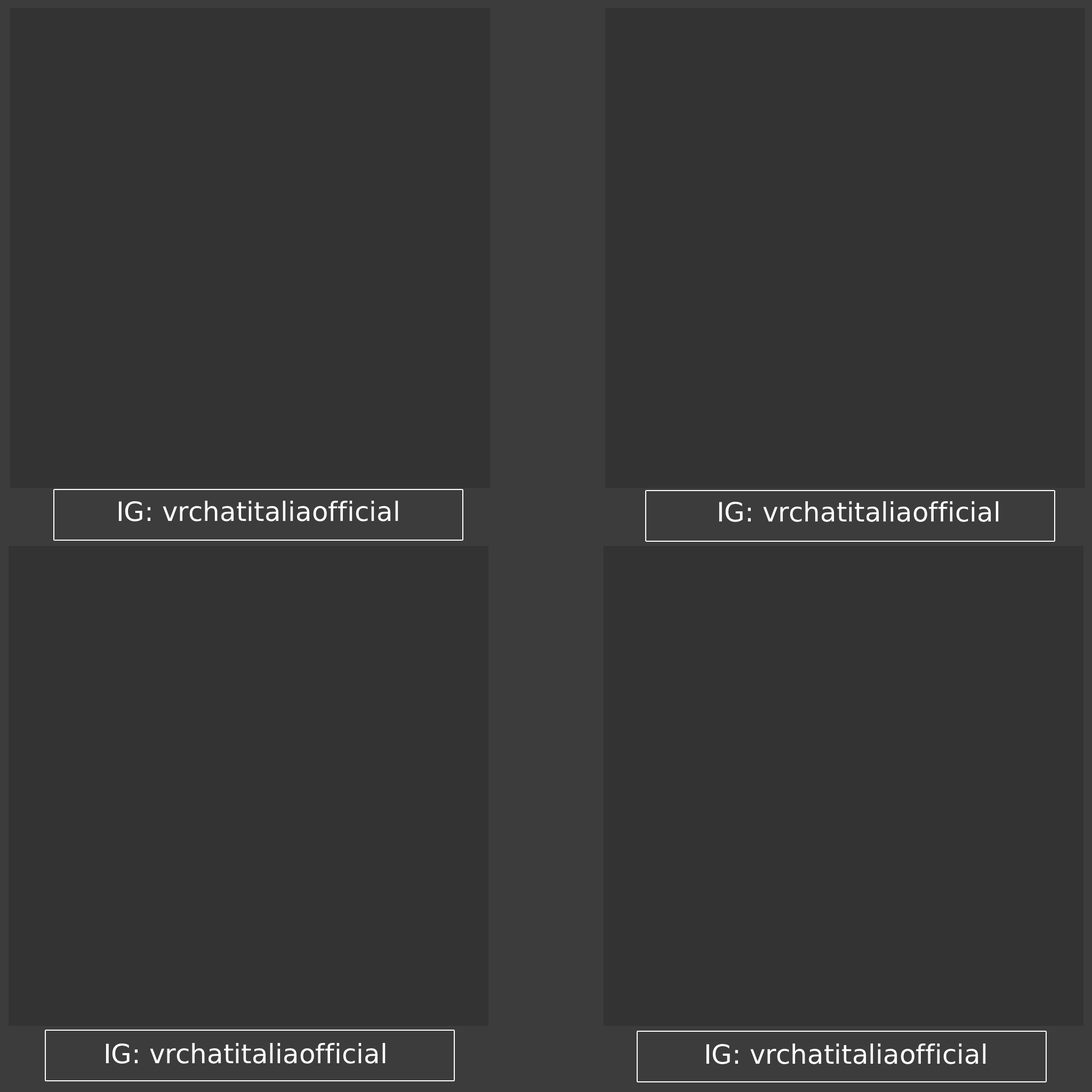
<style>
.page{position:relative;width:1092px;height:1092px;background:#333333}
.page>*{position:absolute;margin:0}
.t1{font:26.7px "DejaVuSans";color:#ffffff}
</style>
<div class="page">
<p class="t1" style="left:118px;top:501px;width:280px;height:20px">IG: vrchatitaliaofficial</p>
<p class="t1" style="left:719px;top:501px;width:280px;height:21px">IG: vrchatitaliaofficial</p>
<p class="t1" style="left:106px;top:1043px;width:280px;height:21px">IG: vrchatitaliaofficial</p>
<p class="t1" style="left:706px;top:1043px;width:280px;height:21px">IG: vrchatitaliaofficial</p>
</div>
